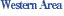
<style>
.page{position:relative;width:64px;height:16px;background:#ffffff}
.page>*{position:absolute;margin:0}
.t1{font:12px "RyuminPro-ExBold";letter-spacing:-0.08em;color:#2f4e96;scale:0.9 1}
</style>
<div class="page">
<p class="t1" style="left:0px;top:0px;width:63px;height:10px">Western Area</p>
</div>
